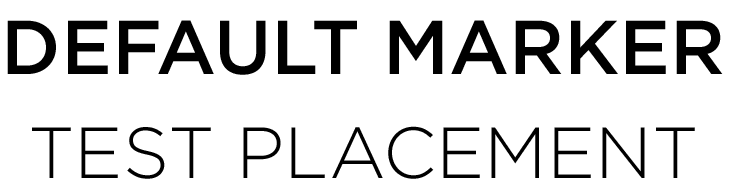
<style>
.page{position:relative;width:734px;height:193px;background:#ffffff}
.page>*{position:absolute;margin:0}
.t1{font:76px "Gotham-Medium";color:#000000}
.t2{font:72px "Gotham-Light";color:#000000}
</style>
<div class="page">
<p class="t1" style="left:7px;top:20px;width:716px;height:55px">DEFAULT MARKER</p>
<p class="t2" style="left:32px;top:126px;width:663px;height:53px">TEST PLACEMENT</p>
</div>
